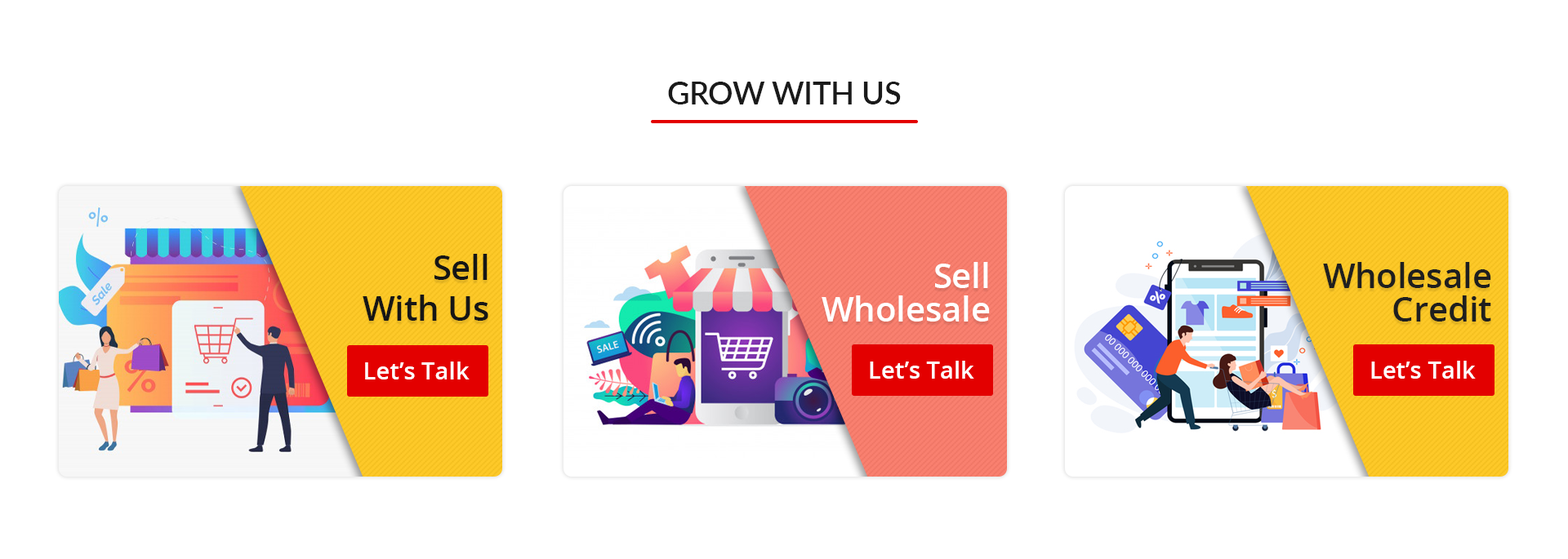
<style>
.page{position:relative;width:1568px;height:559px;background:#ffffff}
.page>*{position:absolute;margin:0}
.t1{font:30.6px "Lato-Semibold";color:#1a1a1a;text-transform:uppercase}
.t2{font:34px "OpenSans-Semibold";color:#161616}
.t3{font:34px/34px "OpenSans-Semibold";color:#ffffff}
.t4{font:34px/34px "OpenSans-Semibold";color:#1f1f1f}
.t5{font:23.8px "OpenSans-Semibold";color:#ffffff}
</style>
<div class="page">
<p class="t1" style="left:668px;top:82px;width:233px;height:23px">Grow With Us</p>
<p class="t2" style="left:363px;top:254px;width:125px;height:67px;text-align:right">Sell<br>With Us</p>
<p class="t3" style="left:822px;top:262px;width:168px;height:60px;text-align:right">Sell<br>Wholesale</p>
<p class="t4" style="left:1323px;top:262px;width:168px;height:60px;text-align:right">Wholesale<br>Credit</p>
<p class="t5" style="left:365px;top:362px;width:105px;height:18px">Let’s Talk</p>
<p class="t5" style="left:870px;top:361px;width:104px;height:18px">Let’s Talk</p>
<p class="t5" style="left:1371px;top:361px;width:105px;height:18px">Let’s Talk</p>
</div>
